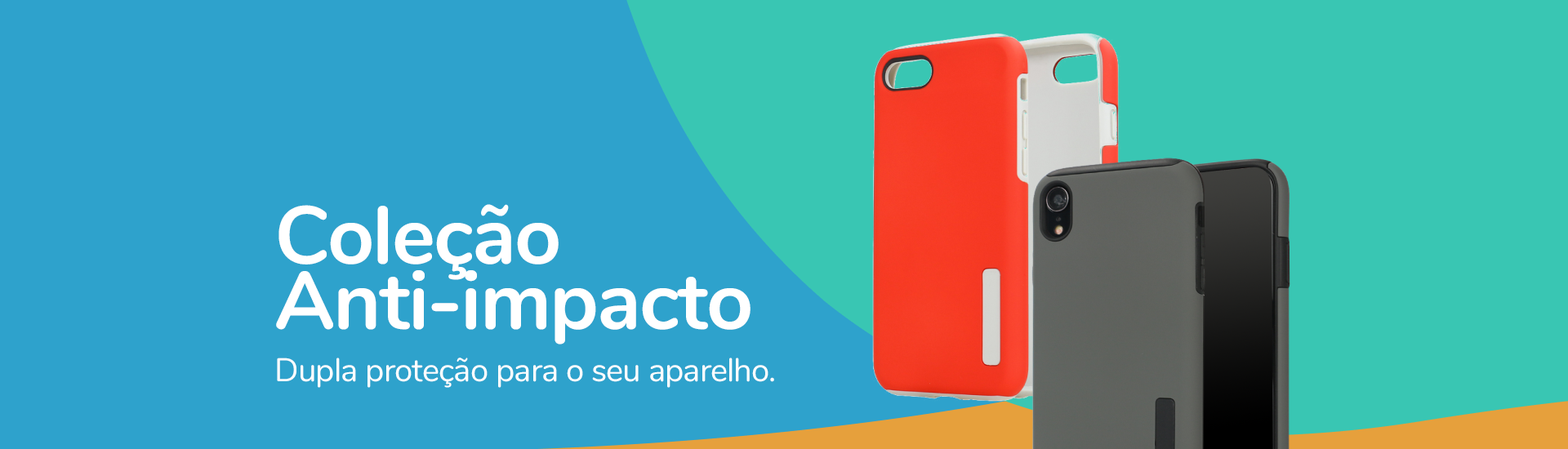
<style>
.page{position:relative;width:1568px;height:449px;background:#2ea2cc}
.page>*{position:absolute;margin:0}
.t1{font:81.7px/65.3px "Nunito-Bold";letter-spacing:-0.02em;color:#ffffff}
.t2{font:32.7px "Nunito-Regular";letter-spacing:-0.02em;color:#ffffff}
</style>
<div class="page">
<p class="t1" style="left:276px;top:204px;width:475px;height:141px">Coleção<br>Anti-impacto</p>
<p class="t2" style="left:277px;top:358px;width:497px;height:30px">Dupla proteção para o seu aparelho.</p>
</div>
